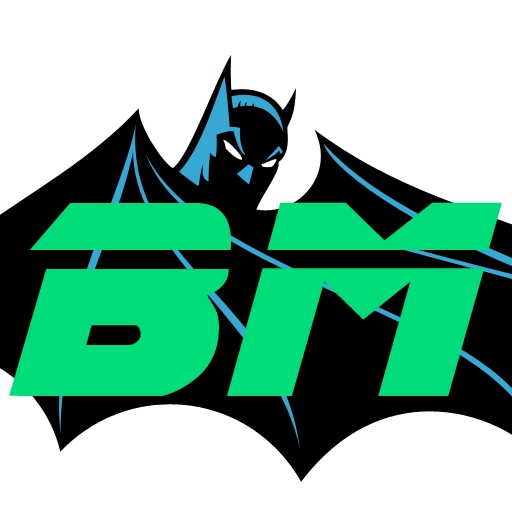
<style>
.page{position:relative;width:512px;height:512px;background:#ffffff}
.page>*{position:absolute;margin:0}
.t1{font:279.2px "BladeRunnerMovieFont";color:#00dc7a}
</style>
<div class="page">
<p class="t1" style="left:9px;top:202px;width:493px;height:194px">BM</p>
</div>
